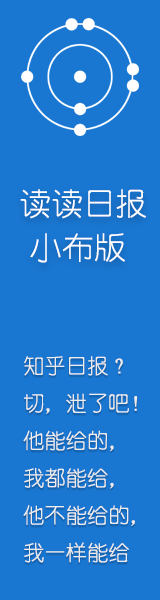
<style>
.page{position:relative;width:160px;height:600px;background:#1977d2}
.page>*{position:absolute;margin:0}
.t1{font:32px "YouYuan";color:#ffffff}
.t2{font:21.3px "YouYuan";color:#ededed}
</style>
<div class="page">
<p class="t1" style="left:20px;top:189px;width:126px;height:30px">读读日报</p>
<p class="t1" style="left:30px;top:233px;width:95px;height:30px">小布版</p>
<p class="t2" style="left:23px;top:356px;width:115px;height:207px">知乎日报？<br>切，泄了吧！<br>他能给的，<br>我都能给，<br>他不能给的，<br>我一样能给</p>
</div>
